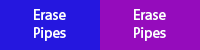
<style>
.page{position:relative;width:200px;height:50px;background:#950cbc}
.page>*{position:absolute;margin:0}
.t1{font:15px "MyriadHebrew-Regular";color:#ffffff}
</style>
<div class="page">
<p class="t1" style="left:34px;top:9px;width:32px;height:32px">Erase <br>Pipes</p>
<p class="t1" style="left:34px;top:9px;width:32px;height:32px">Erase <br>Pipes</p>
<p class="t1" style="left:134px;top:9px;width:32px;height:32px">Erase <br>Pipes</p>
<p class="t1" style="left:134px;top:9px;width:32px;height:32px">Erase <br>Pipes</p>
</div>
